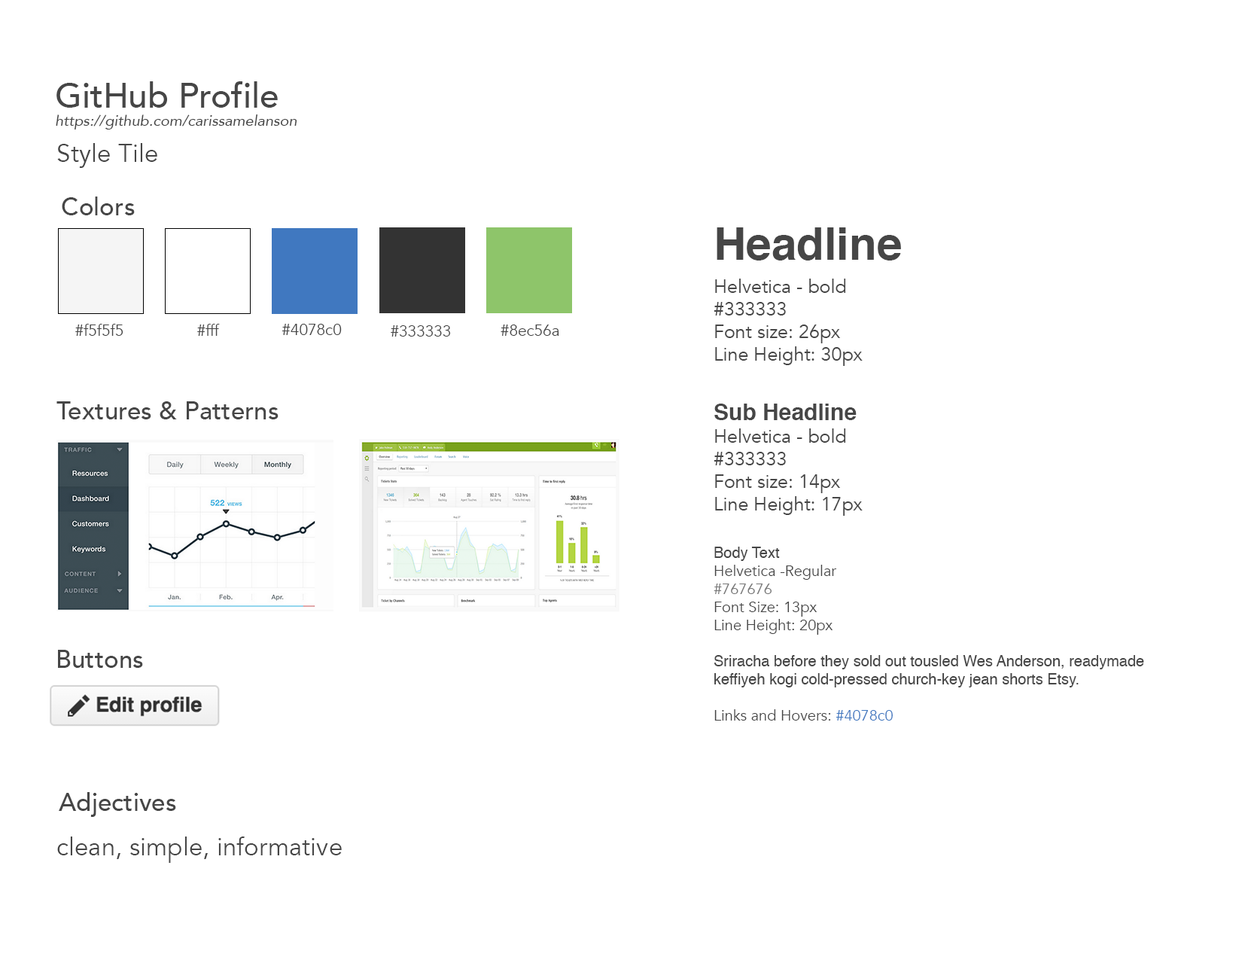
<style>
.page{position:relative;width:1242px;height:960px;background:#ffffff}
.page>*{position:absolute;margin:0}
.t1{font:15.1px "Avenir-Oblique";color:#464646}
.t2{font:34.5px "Avenir-Medium";color:#464646}
.t3{font:25.1px "Avenir-Book";color:#464646}
.t4{font:25.1px "Avenir-Medium";color:#464646}
.t5{font:45.2px "Helvetica-Bold";color:#464646}
.t6{font:18.8px "Avenir-Book";color:#464646}
.t7{font:15.7px "Avenir-Book";color:#464646}
.t8{font:22.6px "Helvetica-Bold";color:#464646}
.t9{font:15.1px "Helvetica";color:#464646}
.t10{font:15.1px "Avenir-Book";color:#464646}
.t11{font:15.1px "Avenir-Book";color:#767676}
.t12{font:15.1px "Avenir-Book";color:#4078c0}
</style>
<div class="page">
<p class="t1" style="left:56px;top:81px;width:241px;height:48px"><span class="t2">GitHub Profile<br></span>https://github.com/carissamelanson</p>
<p class="t3" style="left:57px;top:143px;width:100px;height:25px">Style Tile</p>
<p class="t4" style="left:62px;top:196px;width:73px;height:19px">Colors</p>
<p class="t5" style="left:717px;top:227px;width:184px;height:33px">Headline</p>
<p class="t6" style="left:714px;top:279px;width:149px;height:87px">Helvetica - bold<br>#333333<br>Font size: 26px<br>Line Height: 30px</p>
<p class="t7" style="left:75px;top:324px;width:48px;height:12px">#f5f5f5</p>
<p class="t7" style="left:197px;top:324px;width:23px;height:12px">#fff</p>
<p class="t7" style="left:282px;top:324px;width:60px;height:11px">#4078c0</p>
<p class="t7" style="left:391px;top:325px;width:60px;height:12px">#333333</p>
<p class="t7" style="left:501px;top:324px;width:58px;height:12px">#8ec56a</p>
<p class="t4" style="left:56px;top:401px;width:223px;height:18px">Textures &amp; Patterns</p>
<p class="t6" style="left:714px;top:404px;width:149px;height:112px"><span class="t8">Sub Headline<br></span>Helvetica - bold<br>#333333<br>Font size: 14px<br>Line Height: 17px</p>
<p class="t9" style="left:714px;top:547px;width:430px;height:173px">Body Text<br><span class="t10">Helvetica -Regular<br></span><span class="t11">#767676<br></span><span class="t10">Font Size: 13px<br>Line Height: 20px<br></span><br>Sriracha before they sold out tousled Wes Anderson, readymade keffiyeh kogi cold-pressed church-key jean shorts Etsy. <br><br><span class="t10">Links and Hovers: </span><span class="t12">#4078c0</span></p>
<p class="t4" style="left:58px;top:650px;width:85px;height:18px">Buttons</p>
<p class="t4" style="left:59px;top:792px;width:117px;height:25px">Adjectives</p>
<p class="t3" style="left:57px;top:836px;width:285px;height:27px">clean, simple, informative</p>
</div>
